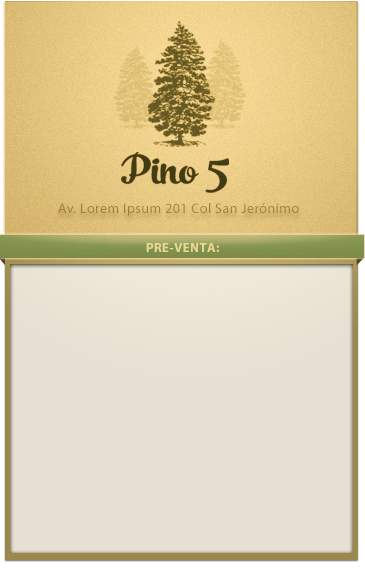
<style>
.page{position:relative;width:365px;height:572px;background:#e6e1d2}
.page>*{position:absolute;margin:0}
.t1{font:14px "MyriadPro-Regular";letter-spacing:0.032em;color:#9c8441}
.t2{font:13px "MyriadPro-Bold";letter-spacing:0.032em;color:#e8d895}
</style>
<div class="page">
<p class="t1" style="left:58px;top:203px;width:241px;height:13px">Av. Lorem Ipsum 201 Col San Jerónimo</p>
<p class="t2" style="left:146px;top:243px;width:73px;height:9px">PRE-VENTA:</p>
</div>
